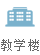
<style>
.page{position:relative;width:40px;height:55px;background:#ffffff}
.page>*{position:absolute;margin:0}
.t1{font:22.5px "SimSun";letter-spacing:0.01em;color:#666666;font-variant:small-caps}
</style>
<div class="page">
<p class="t1" style="left:1px;top:39px;width:38px;height:12px">教学楼</p>
</div>
